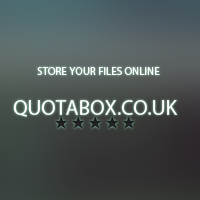
<style>
.page{position:relative;width:200px;height:200px}
.page>*{position:absolute;margin:0}
.t1{font:11px "MyriadPro-Regular";color:#ffffff;text-transform:uppercase}
.t2{font:21px "MyriadPro-Regular";color:#ffffff;text-transform:uppercase}
</style>
<div class="page">
<p class="t1" style="left:37px;top:67px;width:123px;height:8px">STORE YOUR FILES ONLINE</p>
<p class="t2" style="left:13px;top:100px;width:165px;height:17px">QUOTABOX.CO.UK</p>
</div>
